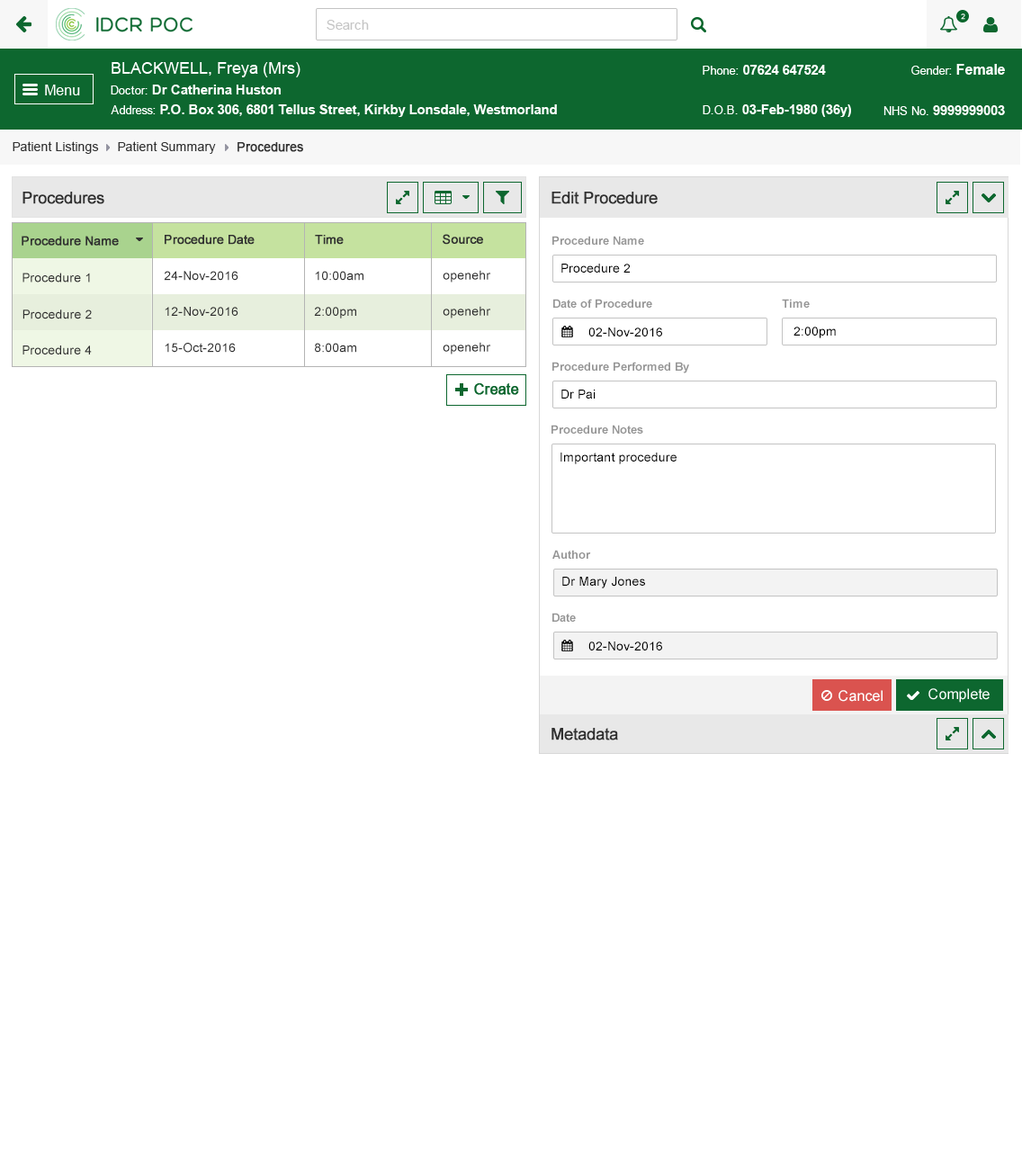
<style>
.page{position:relative;width:1022px;height:1166px;background:#ffffff}
.page>*{position:absolute;margin:0}
.t1{font:12.6px "ArialMT";color:#313131}
.t2{font:12.6px "ArialMT";color:#313131;font-weight:bold}
.t3{font:16.2px "ArialMT";color:#303030;font-weight:bold}
.t4{font:12.6px "ArialMT";color:#303030;font-weight:bold}
.t5{font:11.7px "Arial-BoldMT";color:#959595}
.t6{font:12.6px "ArialMT";color:#303030}
.t7{font:12.6px "ArialMT";color:#000000}
</style>
<div class="page">
<p class="t1" style="left:13px;top:141px;width:86px;height:13px">Patient Listings</p>
<p class="t1" style="left:118px;top:141px;width:98px;height:13px">Patient Summary</p>
<p class="t2" style="left:238px;top:142px;width:65px;height:10px">Procedures</p>
<p class="t3" style="left:22px;top:192px;width:82px;height:12px">Procedures</p>
<p class="t3" style="left:552px;top:192px;width:106px;height:12px">Edit Procedure</p>
<p class="t4" style="left:443px;top:234px;width:40px;height:11px">Source</p>
<p class="t4" style="left:22px;top:236px;width:97px;height:10px">Procedure Name</p>
<p class="t4" style="left:165px;top:235px;width:90px;height:10px">Procedure Date</p>
<p class="t4" style="left:315px;top:235px;width:29px;height:10px">Time</p>
<p class="t5" style="left:553px;top:236px;width:91px;height:9px">Procedure Name</p>
<p class="t6" style="left:443px;top:270px;width:48px;height:13px">openehr</p>
<p class="t7" style="left:562px;top:264px;width:68px;height:9px">Procedure 2</p>
<p class="t6" style="left:22px;top:273px;width:68px;height:10px">Procedure 1</p>
<p class="t6" style="left:164px;top:271px;width:74px;height:10px">24-Nov-2016</p>
<p class="t6" style="left:315px;top:271px;width:49px;height:10px">10:00am</p>
<p class="t6" style="left:443px;top:306px;width:48px;height:13px">openehr</p>
<p class="t5" style="left:553px;top:299px;width:99px;height:9px">Date of Procedure</p>
<p class="t5" style="left:782px;top:299px;width:28px;height:9px">Time</p>
<p class="t6" style="left:22px;top:310px;width:70px;height:9px">Procedure 2</p>
<p class="t6" style="left:165px;top:307px;width:73px;height:9px">12-Nov-2016</p>
<p class="t6" style="left:314px;top:307px;width:42px;height:12px">2:00pm</p>
<p class="t7" style="left:589px;top:328px;width:73px;height:9px">02-Nov-2016</p>
<p class="t7" style="left:794px;top:327px;width:42px;height:11px">2:00pm</p>
<p class="t6" style="left:443px;top:342px;width:48px;height:13px">openehr</p>
<p class="t6" style="left:22px;top:346px;width:70px;height:9px">Procedure 4</p>
<p class="t6" style="left:165px;top:343px;width:71px;height:10px">15-Oct-2016</p>
<p class="t6" style="left:315px;top:343px;width:41px;height:10px">8:00am</p>
<p class="t5" style="left:553px;top:362px;width:136px;height:11px">Procedure Performed By</p>
<p class="t7" style="left:562px;top:390px;width:34px;height:9px">Dr Pai</p>
<p class="t5" style="left:552px;top:425px;width:91px;height:9px">Procedure Notes</p>
<p class="t7" style="left:561px;top:453px;width:116px;height:11px">Important procedure</p>
<p class="t5" style="left:553px;top:550px;width:38px;height:9px">Author</p>
<p class="t7" style="left:562px;top:577px;width:83px;height:12px">Dr Mary Jones</p>
<p class="t5" style="left:553px;top:613px;width:23px;height:9px">Date</p>
<p class="t7" style="left:589px;top:642px;width:73px;height:9px">02-Nov-2016</p>
<p class="t3" style="left:552px;top:728px;width:66px;height:13px">Metadata</p>
</div>
